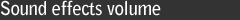
<style>
.page{position:relative;width:240px;height:20px;background:#333333}
.page>*{position:absolute;margin:0}
.t1{font:19px "BellGothicStd-Bold";letter-spacing:-0.025em;color:#ffffff}
</style>
<div class="page">
<p class="t1" style="left:0px;top:0px;width:161px;height:16px">Sound effects volume</p>
</div>
